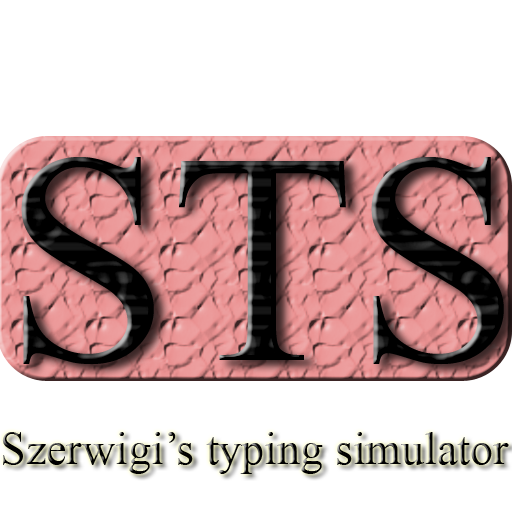
<style>
.page{position:relative;width:512px;height:512px;background:#ffffff}
.page>*{position:absolute;margin:0}
.t1{font:300px "TimesNewRomanPSMT";color:#000000}
.t2{font:46px "TimesNewRomanPSMT";color:#000000}
</style>
<div class="page">
<p class="t1" style="left:21px;top:157px;width:483px;height:208px">STS</p>
<p class="t2" style="left:2px;top:432px;width:507px;height:42px">Szerwigi’s typing simulator</p>
</div>
